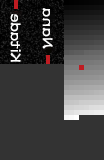
<style>
.page{position:relative;width:104px;height:160px;background:#333333}
.page>*{position:absolute;margin:0}
.t1{font:16px/32px "DFLeiSho-SB-WING-RKSJ-H";color:#ffffff;font-weight:bold}
.t2{font:16px/32px "DFLeiSho-SB-WING-RKSJ-H";letter-spacing:0.05em;color:#ffffff;font-weight:bold}
</style>
<div class="page">
<p class="t1" style="left:10px;top:8px;width:43px;height:54px;text-align:center;rotate:-90deg"><span class="t2">        Nana   <br></span>    Kitade</p>
</div>
